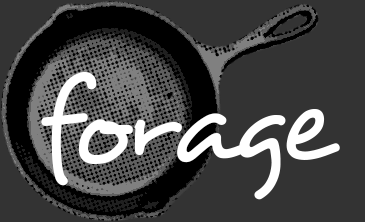
<style>
.page{position:relative;width:365px;height:222px;background:#333333}
.page>*{position:absolute;margin:0}
.t1{font:117.5px "Desyrel";color:#ffffff}
</style>
<div class="page">
<p class="t1" style="left:41px;top:72px;width:299px;height:128px">forage</p>
</div>
